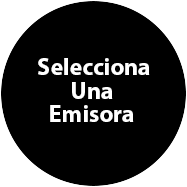
<style>
.page{position:relative;width:187px;height:187px;background:#000000}
.page>*{position:absolute;margin:0}
.t1{font:24px "MyriadPro-Bold";color:#ffffff}
</style>
<div class="page">
<p class="t1" style="left:38px;top:58px;width:112px;height:17px">Selecciona</p>
<p class="t1" style="left:72px;top:82px;width:41px;height:17px">Una</p>
<p class="t1" style="left:50px;top:105px;width:84px;height:17px">Emisora</p>
</div>
